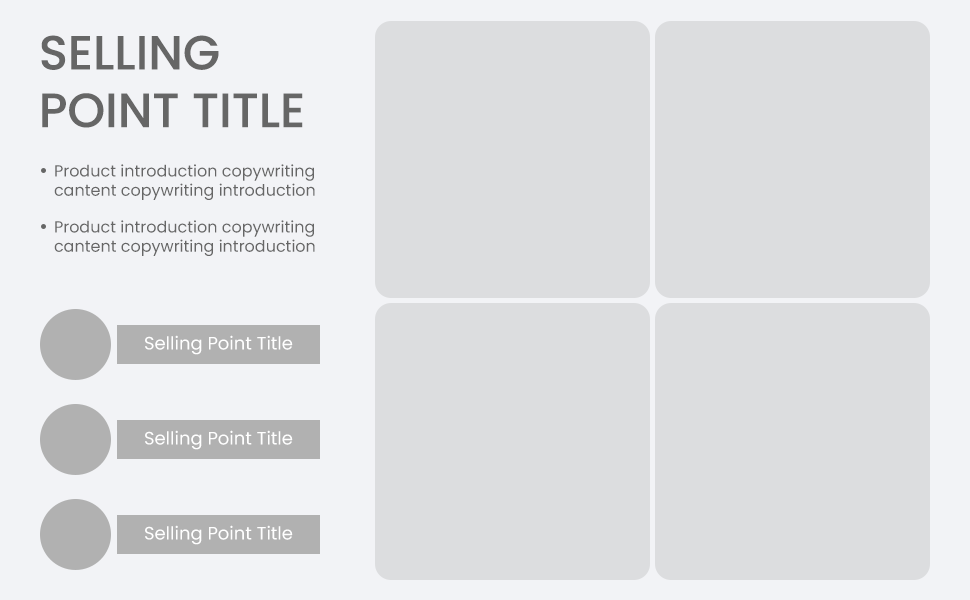
<style>
.page{position:relative;width:970px;height:600px;background:#dcdddf}
.page>*{position:absolute;margin:0}
.t1{font:48px "Poppins-Medium";color:#666666}
.t2{font:16px "Poppins-Regular";color:#666666}
.t3{font:18px "Poppins-Regular";color:#ffffff}
</style>
<div class="page">
<p class="t1" style="left:41px;top:35px;width:262px;height:93px">SELLING<br>POINT TITLE</p>
<p class="t2" style="left:54px;top:164px;width:261px;height:36px">Product introduction copywriting<br>cantent copywriting introduction</p>
<p class="t2" style="left:54px;top:220px;width:261px;height:36px">Product introduction copywriting<br>cantent copywriting introduction</p>
<p class="t3" style="left:145px;top:335px;width:148px;height:20px">Selling Point Title</p>
<p class="t3" style="left:145px;top:430px;width:148px;height:20px">Selling Point Title</p>
<p class="t3" style="left:145px;top:525px;width:148px;height:20px">Selling Point Title</p>
</div>
